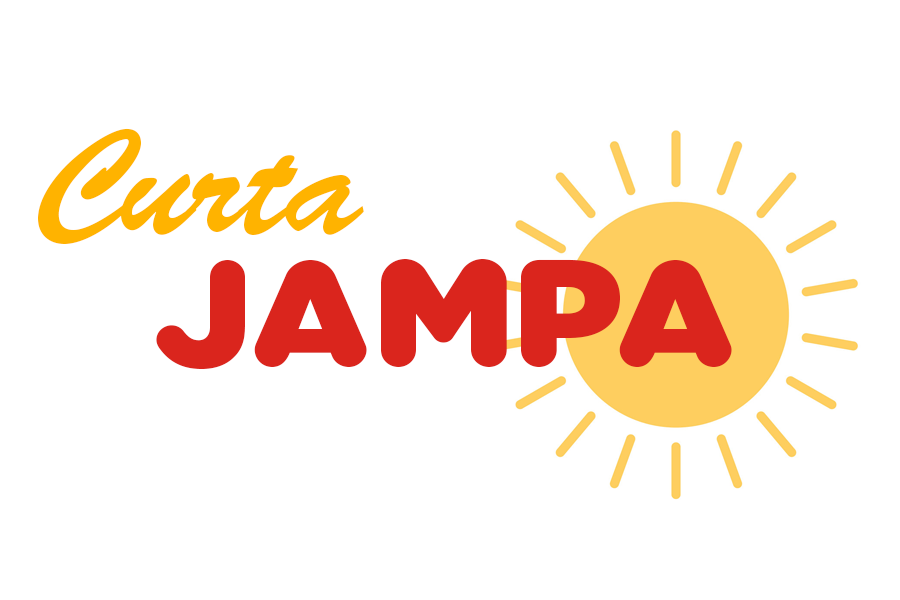
<style>
.page{position:relative;width:900px;height:600px;background:#ffffff}
.page>*{position:absolute;margin:0}
.t1{font:138.8px "BrushScriptStd";color:#ffb300}
.t2{font:149px "BrushScriptStd";color:#ffb300}
.t3{font:158.6px "Sabandija-ffp";color:#da251d}
</style>
<div class="page">
<p class="t1" style="left:38px;top:128px;width:103px;height:116px">C</p>
<p class="t2" style="left:121px;top:155px;width:243px;height:80px">urta</p>
<p class="t3" style="left:156px;top:259px;width:576px;height:110px">JAMPA</p>
</div>
